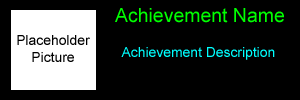
<style>
.page{position:relative;width:300px;height:100px;background:#000000}
.page>*{position:absolute;margin:0}
.t1{font:19.4px "ArialMT";color:#00ff00}
.t2{font:13.9px "ArialMT";color:#000000}
.t3{font:13.9px "ArialMT";color:#00ffff}
</style>
<div class="page">
<p class="t1" style="left:115px;top:8px;width:169px;height:15px">Achievement Name</p>
<p class="t2" style="left:17px;top:35px;width:73px;height:27px;text-align:center">Placeholder<br>Picture</p>
<p class="t3" style="left:121px;top:47px;width:154px;height:13px">Achievement Description</p>
</div>
